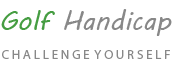
<style>
.page{position:relative;width:172px;height:63px;background:#ffffff}
.page>*{position:absolute;margin:0}
.t1{font:27px "MVBoli";color:#888888}
.t2{font:27px "MVBoli";color:#469d42}
.t3{font:13px "MyriadPro-Regular";color:#888888}
</style>
<div class="page">
<p class="t1" style="left:1px;top:9px;width:171px;height:27px"><span class="t2">Golf </span>Handicap</p>
<p class="t3" style="left:2px;top:50px;width:168px;height:9px">C H A L L E N G E  Y O U R S E L F</p>
</div>
